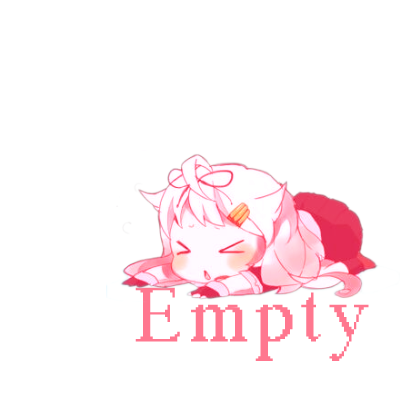
<style>
.page{position:relative;width:400px;height:400px;background:#ffffff}
.page>*{position:absolute;margin:0}
.t1{font:78.2px "MS Serif";letter-spacing:0.08em;color:#ff778f}
</style>
<div class="page">
<p class="t1" style="left:135px;top:287px;width:234px;height:74px">Empty</p>
</div>
